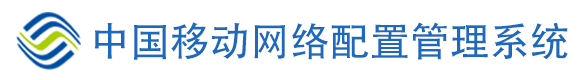
<style>
.page{position:relative;width:587px;height:80px;background:#ffffff}
.page>*{position:absolute;margin:0}
.t1{font:40px "MicrosoftYaHei";color:#1c6abd}
</style>
<div class="page">
<p class="t1" style="left:95px;top:22px;width:473px;height:38px">中国移动网络配置管理系统</p>
</div>
